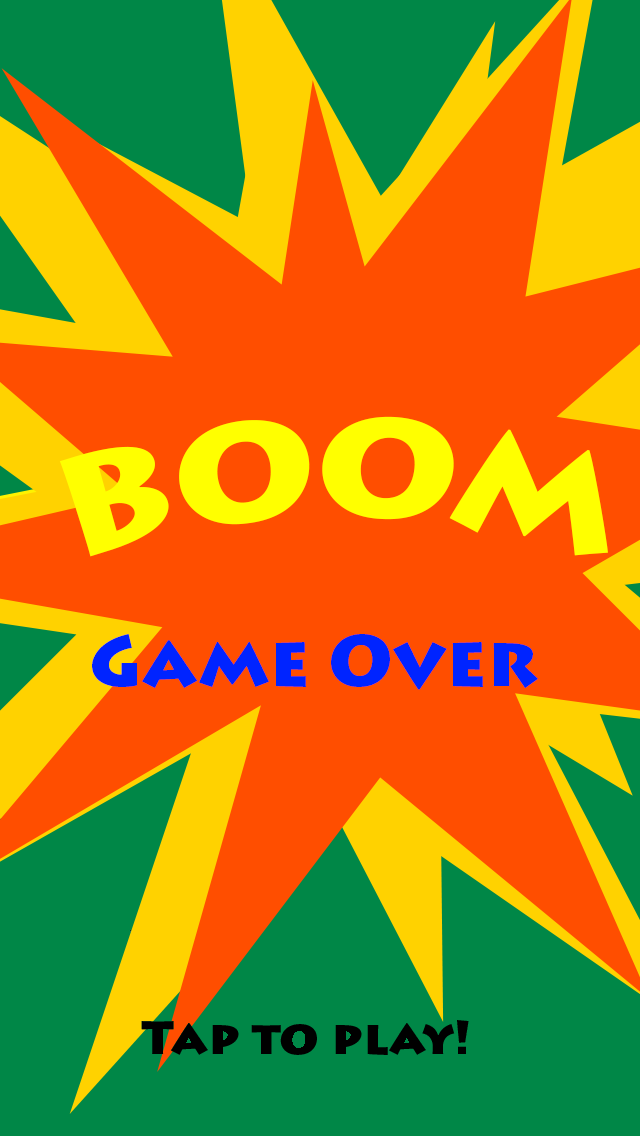
<style>
.page{position:relative;width:640px;height:1136px;background:#ff4e00}
.page>*{position:absolute;margin:0}
.t1{font:140px "LithosPro-Black";color:#ffff00}
.t2{font:72px "LithosPro-Black";color:#0024ff}
</style>
<div class="page">
<p class="t1" style="left:59px;top:416px;width:549px;height:141px">BOOM</p>
<p class="t2" style="left:92px;top:634px;width:446px;height:56px">Game Over</p>
</div>
